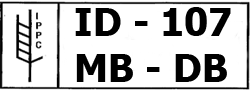
<style>
.page{position:relative;width:250px;height:90px;background:#ffffff}
.page>*{position:absolute;margin:0}
.t1{font:38px "Tahoma-Bold";color:#000000}
</style>
<div class="page">
<p class="t1" style="left:75px;top:7px;width:156px;height:75px">ID - 107<br>MB - DB</p>
</div>
